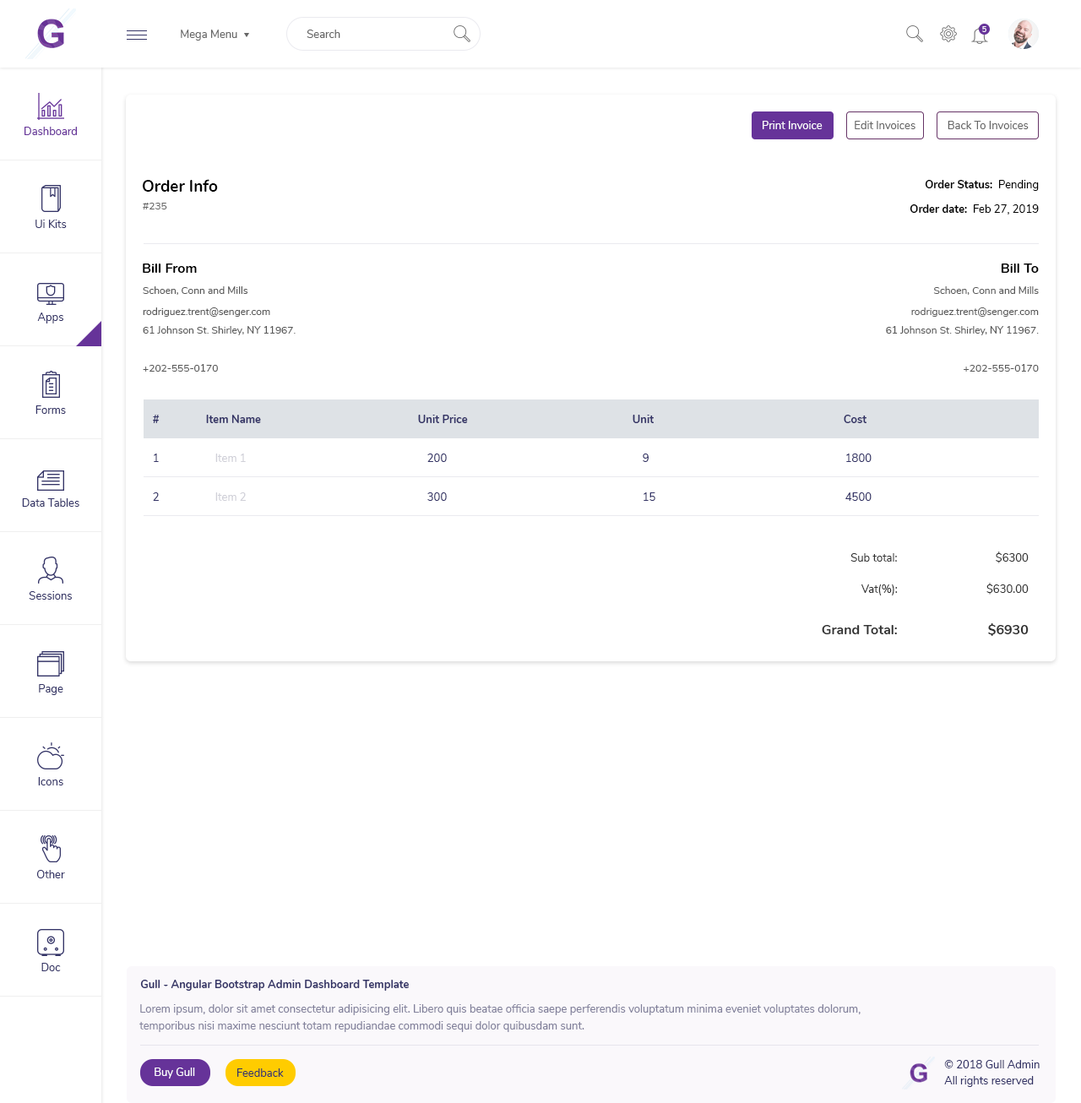
<style>
.page{position:relative;width:1081px;height:1103px;background:#ffffff}
.page>*{position:absolute;margin:0}
.t1{font:11px "Nunito-Regular";color:#666666}
.t2{font:7.6px "Nunito-SemiBold";color:#ffffff}
.t3{font:11px "Nunito-Regular";color:#ffffff}
.t4{font:11px "Nunito-Regular";color:#663399}
.t5{font:16px "Nunito-Bold";color:#000000}
.t6{font:11px "Nunito-Bold";color:#000000}
.t7{font:11px "Nunito-Regular";color:#000000}
.t8{font:10.1px "Nunito-Regular";color:#666666}
.t9{font:11px "Nunito-Regular";color:#333366}
.t10{font:13.5px "Nunito-Bold";color:#000000}
.t11{font:10.1px "Nunito-Regular";color:#585858}
.t12{font:10.1px/18.6px "Nunito-Regular";color:#585858}
.t13{font:11px "Nunito-Bold";color:#333366}
.t14{font:11px "Nunito-Regular";color:#d0d0d8}
.t15{font:11px "Nunito-Regular";color:#333333}
.t16{font:13.5px "Nunito-Bold";color:#333333}
.t17{font:11px/16.9px "Nunito-Regular";color:#82819b}
</style>
<div class="page">
<p class="t1" style="left:181px;top:30px;width:56px;height:11px">Mega Menu</p>
<p class="t1" style="left:307px;top:30px;width:33px;height:8px">Search</p>
<p class="t2" style="left:982px;top:26px;width:4px;height:6px">5</p>
<p class="t3" style="left:763px;top:121px;width:60px;height:8px">Print Invoice</p>
<p class="t1" style="left:855px;top:121px;width:61px;height:8px">Edit Invoices</p>
<p class="t1" style="left:948px;top:121px;width:81px;height:8px">Back To Invoices</p>
<p class="t4" style="left:24px;top:127px;width:53px;height:8px">Dashboard</p>
<p class="t5" style="left:143px;top:179px;width:75px;height:13px">Order Info</p>
<p class="t6" style="left:925px;top:180px;width:114px;height:11px">Order Status:<span class="t7">  Pending</span></p>
<p class="t8" style="left:143px;top:203px;width:24px;height:6px">#235</p>
<p class="t7" style="left:910px;top:204px;width:129px;height:11px"><span class="t6">Order date:</span>  Feb 27, 2019</p>
<p class="t9" style="left:35px;top:220px;width:32px;height:8px">Ui Kits</p>
<p class="t10" style="left:143px;top:264px;width:54px;height:9px">Bill From</p>
<p class="t10" style="left:1001px;top:264px;width:38px;height:9px">Bill To</p>
<p class="t11" style="left:143px;top:286px;width:105px;height:9px">Schoen, Conn and Mills</p>
<p class="t11" style="left:933px;top:286px;width:106px;height:9px">Schoen, Conn and Mills</p>
<p class="t9" style="left:37px;top:312px;width:26px;height:11px">Apps</p>
<p class="t12" style="left:143px;top:307px;width:153px;height:28px">rodriguez.trent@senger.com <br>61 Johnson St. Shirley, NY 11967.</p>
<p class="t12" style="left:886px;top:307px;width:153px;height:28px;text-align:right">rodriguez.trent@senger.com <br>61 Johnson St. Shirley, NY 11967.</p>
<p class="t11" style="left:143px;top:364px;width:75px;height:8px">+202-555-0170</p>
<p class="t11" style="left:964px;top:364px;width:75px;height:8px">+202-555-0170</p>
<p class="t9" style="left:35px;top:405px;width:31px;height:9px">Forms</p>
<p class="t13" style="left:153px;top:415px;width:7px;height:8px">#</p>
<p class="t13" style="left:206px;top:415px;width:55px;height:8px">Item Name</p>
<p class="t13" style="left:418px;top:415px;width:50px;height:8px">Unit Price</p>
<p class="t13" style="left:633px;top:415px;width:21px;height:8px">Unit</p>
<p class="t13" style="left:844px;top:415px;width:23px;height:8px">Cost</p>
<p class="t9" style="left:154px;top:454px;width:5px;height:8px">1</p>
<p class="t14" style="left:215px;top:454px;width:31px;height:8px">Item 1</p>
<p class="t9" style="left:427px;top:454px;width:20px;height:8px">200</p>
<p class="t9" style="left:643px;top:454px;width:6px;height:8px">9</p>
<p class="t9" style="left:846px;top:454px;width:26px;height:8px">1800</p>
<p class="t9" style="left:153px;top:492px;width:6px;height:9px">2</p>
<p class="t14" style="left:215px;top:492px;width:31px;height:9px">Item 2</p>
<p class="t9" style="left:427px;top:492px;width:20px;height:9px">300</p>
<p class="t9" style="left:644px;top:492px;width:11px;height:9px">15</p>
<p class="t9" style="left:845px;top:492px;width:27px;height:9px">4500</p>
<p class="t9" style="left:22px;top:498px;width:57px;height:9px">Data Tables</p>
<p class="t15" style="left:850px;top:553px;width:47px;height:9px">Sub total:</p>
<p class="t15" style="left:996px;top:552px;width:33px;height:11px">$6300</p>
<p class="t9" style="left:29px;top:591px;width:43px;height:9px">Sessions</p>
<p class="t15" style="left:861px;top:584px;width:37px;height:11px">Vat(%):</p>
<p class="t15" style="left:986px;top:583px;width:43px;height:12px">$630.00</p>
<p class="t16" style="left:822px;top:625px;width:75px;height:9px">Grand Total:</p>
<p class="t16" style="left:988px;top:623px;width:41px;height:13px">$6930</p>
<p class="t9" style="left:39px;top:684px;width:24px;height:11px">Page</p>
<p class="t9" style="left:38px;top:777px;width:25px;height:8px">Icons</p>
<p class="t9" style="left:36px;top:870px;width:29px;height:8px">Other</p>
<p class="t9" style="left:41px;top:963px;width:20px;height:8px">Doc</p>
<p class="t13" style="left:140px;top:980px;width:269px;height:11px">Gull - Angular Bootstrap Admin Dashboard Template</p>
<p class="t17" style="left:139px;top:1004px;width:722px;height:28px">Lorem ipsum, dolor sit amet consectetur adipisicing elit. Libero quis beatae officia saepe perferendis voluptatum minima eveniet voluptates dolorum, <br>temporibus nisi maxime nesciunt totam repudiandae commodi sequi dolor quibusdam sunt.</p>
<p class="t9" style="left:944px;top:1060px;width:96px;height:8px">© 2018 Gull Admin</p>
<p class="t3" style="left:155px;top:1068px;width:40px;height:11px">Buy Gull</p>
<p class="t9" style="left:237px;top:1068px;width:47px;height:9px">Feedback</p>
<p class="t9" style="left:944px;top:1076px;width:90px;height:11px">All rights reserved</p>
</div>
